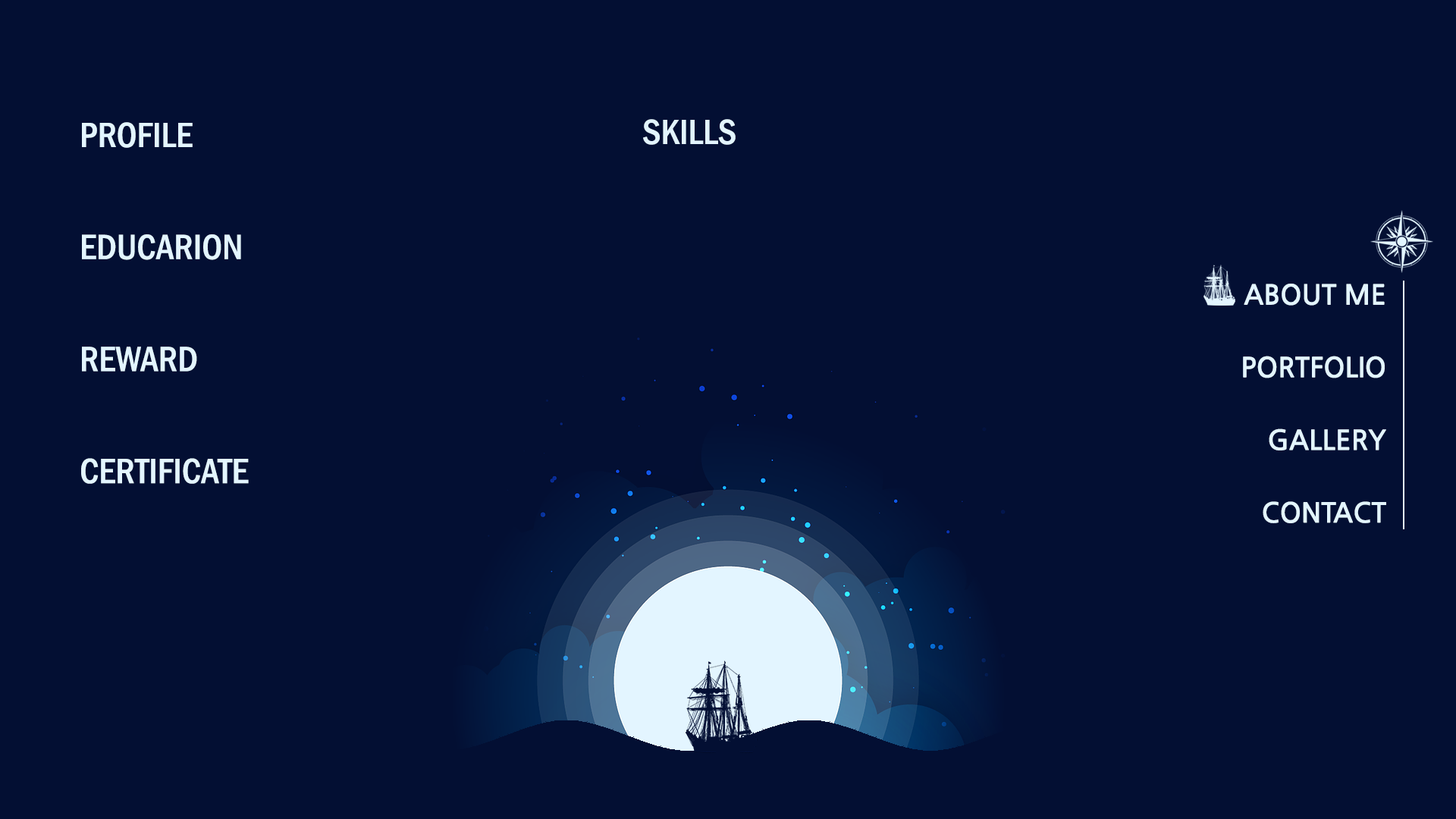
<style>
.page{position:relative;width:1456px;height:819px;background:#030f33}
.page>*{position:absolute;margin:0}
.t1{font:36.4px/56px "FranklinGothic-MediumCond";color:#e3f5ff}
.t2{font:36.4px "FranklinGothic-MediumCond";color:#e2f4fe}
.t3{font:27.3px/36.3px "NanumGothicBold";color:#e3f5ff}
</style>
<div class="page">
<p class="t1" style="left:81px;top:122px;width:168px;height:362px">PROFILE<br><br>EDUCARION<br><br>REWARD<br><br>CERTIFICATE</p>
<p class="t2" style="left:643px;top:119px;width:93px;height:26px">SKILLS</p>
<p class="t3" style="left:1243px;top:284px;width:143px;height:239px;text-align:right">ABOUT ME<br><br>PORTFOLIO<br><br>GALLERY<br><br>CONTACT</p>
</div>
